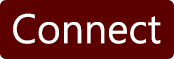
<style>
.page{position:relative;width:174px;height:59px;background:#5d0000}
.page>*{position:absolute;margin:0}
.t1{font:38px "MicrosoftJhengHeiUIRegular";color:#ffffff}
</style>
<div class="page">
<p class="t1" style="left:13px;top:13px;width:148px;height:31px">Connect</p>
</div>
